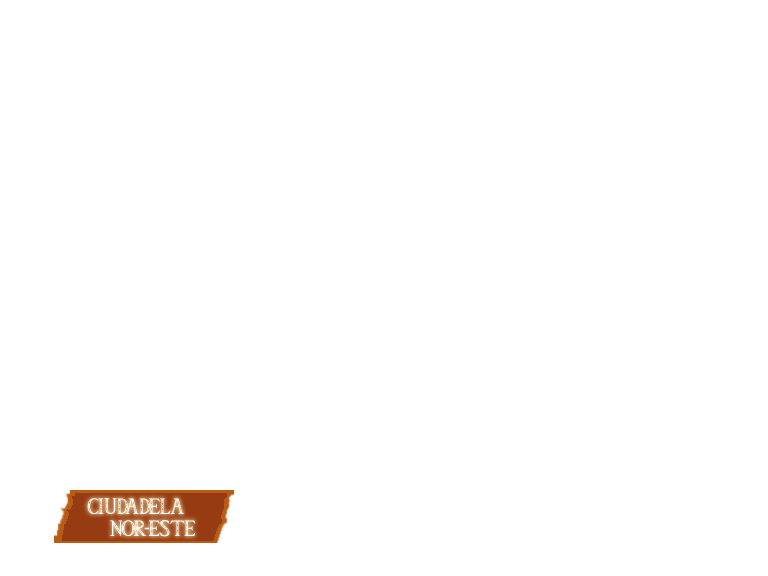
<style>
.page{position:relative;width:768px;height:576px;background:#ffffff}
.page>*{position:absolute;margin:0}
.t1{font:18px "Triforce";color:#ffffff}
</style>
<div class="page">
<p class="t1" style="left:87px;top:498px;width:109px;height:39px">CIUDADELA <br>    NOR-ESTE</p>
</div>
